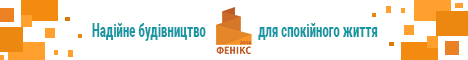
<style>
.page{position:relative;width:468px;height:60px;background:#ffffff}
.page>*{position:absolute;margin:0}
.t1{font:18.6px "Roboto-Black";letter-spacing:0.005em;color:#1697a3;scale:0.61 1}
</style>
<div class="page">
<p class="t1" style="left:92px;top:23px;width:114px;height:18px">Надійне будівництво</p>
<p class="t1" style="left:258px;top:23px;width:120px;height:17px">для спокійного життя</p>
</div>
